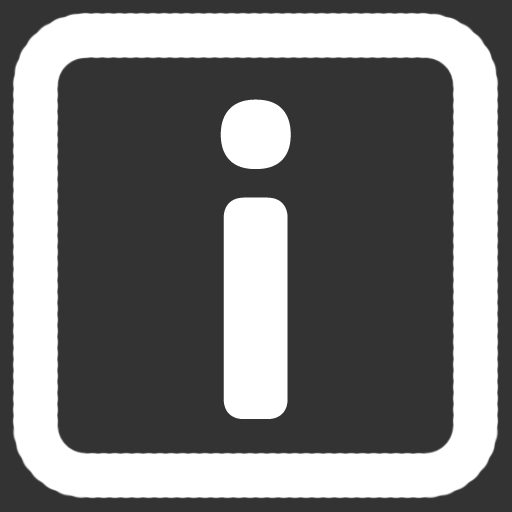
<style>
.page{position:relative;width:512px;height:512px;background:#333333}
.page>*{position:absolute;margin:0}
.t1{font:450px "Arlon-SemiBold";color:#ffffff}
</style>
<div class="page">
<p class="t1" style="left:220px;top:99px;width:71px;height:320px">i</p>
</div>
